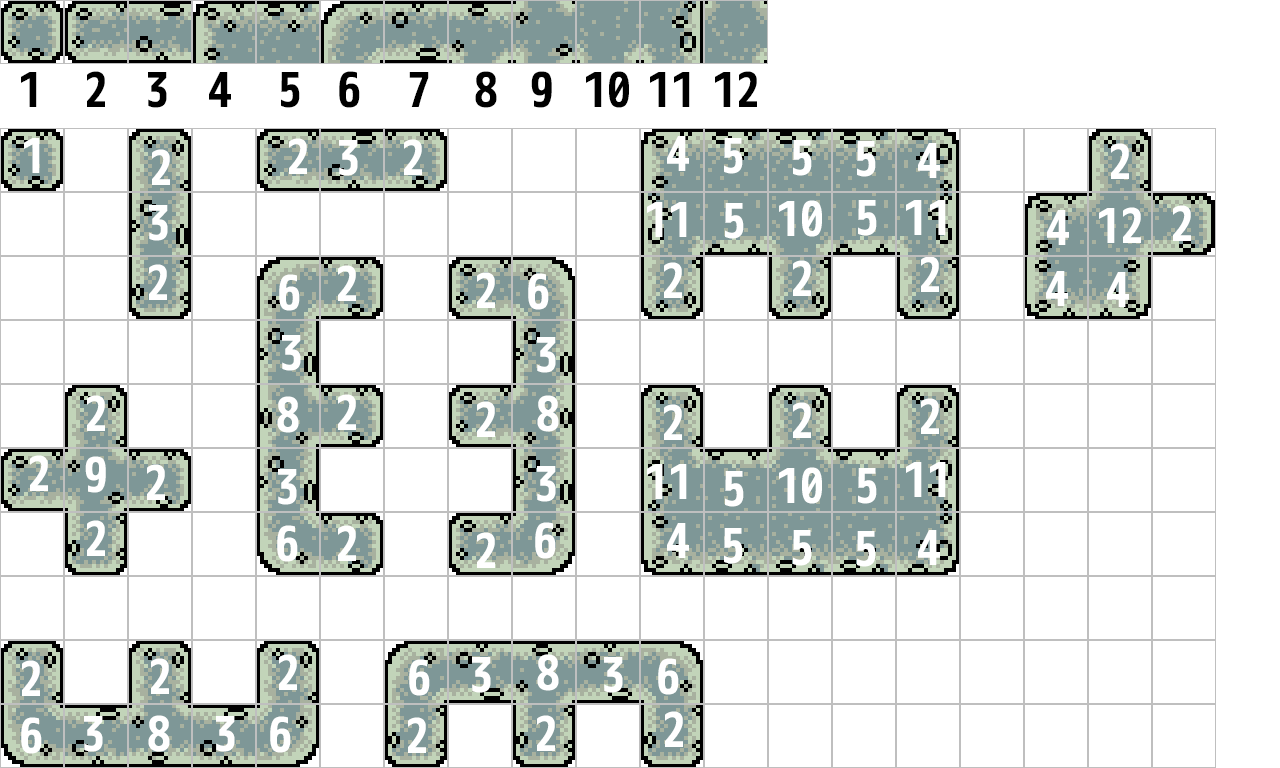
<style>
.page{position:relative;width:1280px;height:768px;background:#ffffff}
.page>*{position:absolute;margin:0}
.t1{font:48px "mplus-1m-bold";color:#000000}
.t2{font:48px "mplus-1m-bold";color:#ffffff}
</style>
<div class="page">
<p class="t1" style="left:21px;top:71px;width:736px;height:37px">123456789101112</p>
<p class="t2" style="left:667px;top:136px;width:22px;height:35px">4</p>
<p class="t2" style="left:24px;top:138px;width:16px;height:35px">1</p>
<p class="t2" style="left:152px;top:149px;width:18px;height:36px">2</p>
<p class="t2" style="left:289px;top:138px;width:18px;height:36px">2</p>
<p class="t2" style="left:339px;top:140px;width:19px;height:36px">3</p>
<p class="t2" style="left:404px;top:139px;width:18px;height:36px">2</p>
<p class="t2" style="left:724px;top:138px;width:19px;height:36px">5</p>
<p class="t2" style="left:793px;top:140px;width:19px;height:36px">5</p>
<p class="t2" style="left:857px;top:141px;width:19px;height:36px">5</p>
<p class="t2" style="left:918px;top:143px;width:22px;height:35px">4</p>
<p class="t2" style="left:1111px;top:143px;width:18px;height:36px">2</p>
<p class="t2" style="left:149px;top:205px;width:19px;height:36px">3</p>
<p class="t2" style="left:647px;top:202px;width:40px;height:35px">11</p>
<p class="t2" style="left:725px;top:203px;width:19px;height:36px">5</p>
<p class="t2" style="left:779px;top:200px;width:43px;height:37px">10</p>
<p class="t2" style="left:858px;top:200px;width:19px;height:36px">5</p>
<p class="t2" style="left:906px;top:200px;width:40px;height:35px">11</p>
<p class="t2" style="left:1099px;top:207px;width:42px;height:36px">12</p>
<p class="t2" style="left:1173px;top:205px;width:18px;height:36px">2</p>
<p class="t2" style="left:1047px;top:210px;width:22px;height:35px">4</p>
<p class="t2" style="left:921px;top:256px;width:18px;height:36px">2</p>
<p class="t2" style="left:149px;top:264px;width:18px;height:36px">2</p>
<p class="t2" style="left:338px;top:265px;width:18px;height:36px">2</p>
<p class="t2" style="left:664px;top:262px;width:18px;height:36px">2</p>
<p class="t2" style="left:793px;top:260px;width:18px;height:36px">2</p>
<p class="t2" style="left:279px;top:274px;width:21px;height:37px">6</p>
<p class="t2" style="left:477px;top:272px;width:18px;height:36px">2</p>
<p class="t2" style="left:528px;top:273px;width:21px;height:37px">6</p>
<p class="t2" style="left:1046px;top:271px;width:22px;height:35px">4</p>
<p class="t2" style="left:1107px;top:272px;width:22px;height:35px">4</p>
<p class="t2" style="left:282px;top:335px;width:19px;height:36px">3</p>
<p class="t2" style="left:537px;top:337px;width:19px;height:36px">3</p>
<p class="t2" style="left:87px;top:395px;width:18px;height:36px">2</p>
<p class="t2" style="left:277px;top:396px;width:22px;height:37px">8</p>
<p class="t2" style="left:338px;top:394px;width:18px;height:36px">2</p>
<p class="t2" style="left:477px;top:401px;width:18px;height:36px">2</p>
<p class="t2" style="left:537px;top:395px;width:22px;height:37px">8</p>
<p class="t2" style="left:921px;top:398px;width:18px;height:36px">2</p>
<p class="t2" style="left:664px;top:404px;width:18px;height:36px">2</p>
<p class="t2" style="left:793px;top:402px;width:18px;height:36px">2</p>
<p class="t2" style="left:30px;top:455px;width:18px;height:36px">2</p>
<p class="t2" style="left:85px;top:456px;width:21px;height:37px">9</p>
<p class="t2" style="left:906px;top:462px;width:40px;height:35px">11</p>
<p class="t2" style="left:147px;top:464px;width:18px;height:36px">2</p>
<p class="t2" style="left:278px;top:469px;width:19px;height:36px">3</p>
<p class="t2" style="left:537px;top:466px;width:19px;height:36px">3</p>
<p class="t2" style="left:647px;top:464px;width:40px;height:35px">11</p>
<p class="t2" style="left:725px;top:471px;width:19px;height:36px">5</p>
<p class="t2" style="left:779px;top:467px;width:43px;height:37px">10</p>
<p class="t2" style="left:858px;top:468px;width:19px;height:36px">5</p>
<p class="t2" style="left:87px;top:520px;width:18px;height:36px">2</p>
<p class="t2" style="left:277px;top:525px;width:21px;height:37px">6</p>
<p class="t2" style="left:338px;top:525px;width:18px;height:36px">2</p>
<p class="t2" style="left:477px;top:532px;width:18px;height:36px">2</p>
<p class="t2" style="left:535px;top:522px;width:21px;height:37px">6</p>
<p class="t2" style="left:667px;top:523px;width:22px;height:35px">4</p>
<p class="t2" style="left:724px;top:528px;width:19px;height:36px">5</p>
<p class="t2" style="left:793px;top:530px;width:19px;height:36px">5</p>
<p class="t2" style="left:857px;top:531px;width:19px;height:36px">5</p>
<p class="t2" style="left:918px;top:530px;width:22px;height:35px">4</p>
<p class="t2" style="left:279px;top:654px;width:18px;height:36px">2</p>
<p class="t2" style="left:537px;top:654px;width:22px;height:37px">8</p>
<p class="t2" style="left:22px;top:660px;width:18px;height:36px">2</p>
<p class="t2" style="left:151px;top:658px;width:18px;height:36px">2</p>
<p class="t2" style="left:409px;top:659px;width:21px;height:37px">6</p>
<p class="t2" style="left:472px;top:657px;width:19px;height:36px">3</p>
<p class="t2" style="left:604px;top:657px;width:19px;height:36px">3</p>
<p class="t2" style="left:658px;top:658px;width:21px;height:37px">6</p>
<p class="t2" style="left:665px;top:711px;width:18px;height:36px">2</p>
<p class="t2" style="left:21px;top:717px;width:21px;height:37px">6</p>
<p class="t2" style="left:84px;top:716px;width:19px;height:36px">3</p>
<p class="t2" style="left:148px;top:715px;width:22px;height:37px">8</p>
<p class="t2" style="left:216px;top:716px;width:19px;height:36px">3</p>
<p class="t2" style="left:270px;top:716px;width:21px;height:37px">6</p>
<p class="t2" style="left:408px;top:717px;width:18px;height:36px">2</p>
<p class="t2" style="left:537px;top:715px;width:18px;height:36px">2</p>
</div>
